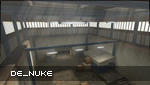
<style>
.page{position:relative;width:150px;height:85px}
.page>*{position:absolute;margin:0}
.t1{font:8px "04b21";color:#ffffff}
</style>
<div class="page">
<p class="t1" style="left:11px;top:71px;width:41px;height:5px">DE_NUKE</p>
</div>
